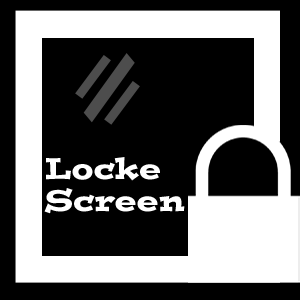
<style>
.page{position:relative;width:300px;height:300px;background:#000000}
.page>*{position:absolute;margin:0}
.t1{font:29.9px "PostinoStd";color:#ffffff}
</style>
<div class="page">
<p class="t1" style="left:46px;top:157px;width:114px;height:24px">Locke</p>
<p class="t1" style="left:44px;top:188px;width:141px;height:26px">Screen</p>
</div>
